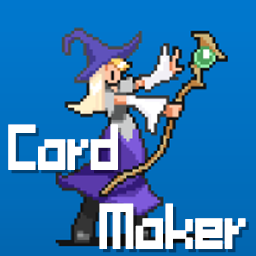
<style>
.page{position:relative;width:256px;height:256px}
.page>*{position:absolute;margin:0}
.t1{font:75.9px/39.5px "tama-mini02";letter-spacing:-0.075em;color:#ffffff;font-weight:bold;scale:0.89 1}
.t2{font:75.9px/39.5px "tama-mini02";letter-spacing:-0.075em;font-weight:bold;scale:0.89 1}
</style>
<div class="page">
<p class="t1" style="left:8px;top:124px;width:238px;height:125px">Card<br><br>   Maker</p>
<p class="t2" style="left:11px;top:127px;width:238px;height:126px">Card<br><br>   Maker</p>
</div>
